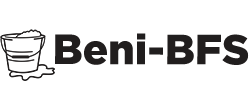
<style>
.page{position:relative;width:250px;height:100px;background:#ffffff}
.page>*{position:absolute;margin:0}
.t1{font:42.1px "Gotham-Black";color:#211e1e}
</style>
<div class="page">
<p class="t1" style="left:55px;top:33px;width:194px;height:32px">Beni-BFS</p>
</div>
